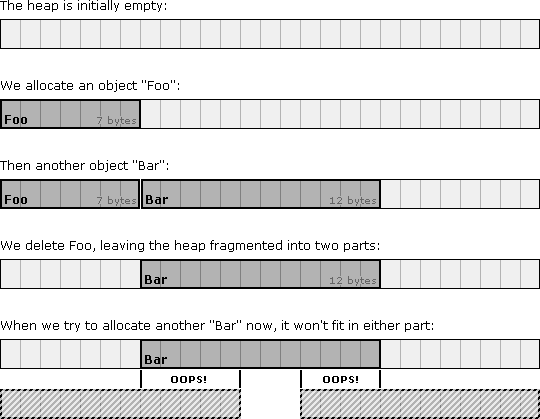
<style>
.page{position:relative;width:540px;height:419px;background:#ffffff}
.page>*{position:absolute;margin:0}
.t1{font:12px/80px "Verdana";color:#000000}
.t2{font:12px "Verdana-Bold";color:#000000}
.t3{font:10px "Verdana";color:#666666}
.t4{font:10px "Verdana-Bold";color:#000000}
</style>
<div class="page">
<p class="t1" style="left:0px;top:0px;width:433px;height:332px">The heap is initially empty:<br>We allocate an object "Foo":<br>Then another object "Bar":<br>We delete Foo, leaving the heap fragmented into two parts:<br>When we try to allocate another "Bar" now, it won't fit in either part:</p>
<p class="t2" style="left:5px;top:115px;width:22px;height:9px">Foo</p>
<p class="t3" style="left:97px;top:116px;width:39px;height:10px">7 bytes</p>
<p class="t2" style="left:5px;top:195px;width:22px;height:9px">Foo</p>
<p class="t3" style="left:97px;top:196px;width:39px;height:10px">7 bytes</p>
<p class="t2" style="left:146px;top:195px;width:22px;height:9px">Bar</p>
<p class="t3" style="left:330px;top:196px;width:46px;height:10px">12 bytes</p>
<p class="t2" style="left:145px;top:275px;width:22px;height:9px">Bar</p>
<p class="t3" style="left:330px;top:276px;width:46px;height:10px">12 bytes</p>
<p class="t2" style="left:145px;top:355px;width:22px;height:9px">Bar</p>
<p class="t4" style="left:171px;top:376px;width:35px;height:7px">OOPS!</p>
<p class="t4" style="left:323px;top:376px;width:35px;height:7px">OOPS!</p>
</div>
